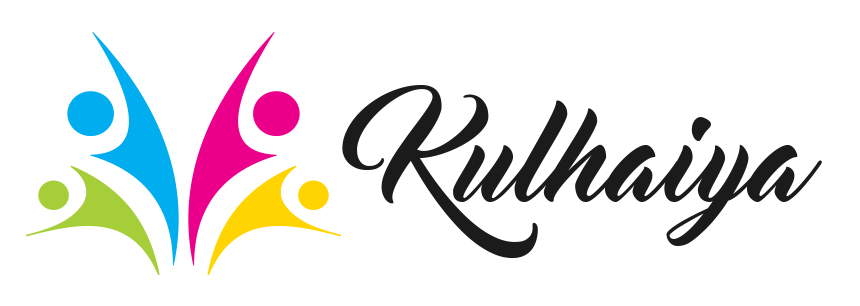
<style>
.page{position:relative;width:860px;height:306px;background:#ffffff}
.page>*{position:absolute;margin:0}
.t1{font:114.9px "MasterOfBreak";color:#1b1b1b}
</style>
<div class="page">
<p class="t1" style="left:342px;top:85px;width:480px;height:173px">Kulhaiya</p>
</div>
